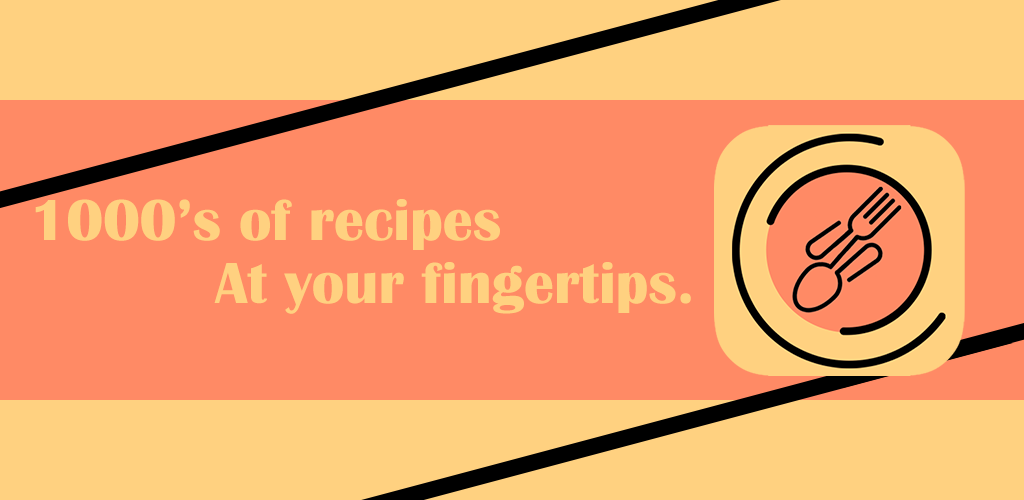
<style>
.page{position:relative;width:1024px;height:500px;background:#ff8a65}
.page>*{position:absolute;margin:0}
.t1{font:60px "BritannicBold";color:#ffd180}
</style>
<div class="page">
<p class="t1" style="left:35px;top:199px;width:465px;height:51px">1000’s of recipes</p>
<p class="t1" style="left:214px;top:262px;width:477px;height:52px">At your fingertips.</p>
</div>
